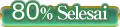
<style>
.page{position:relative;width:120px;height:27px;background:#ffffff}
.page>*{position:absolute;margin:0}
.t1{font:18px "RyuminPro-ExBold";letter-spacing:-0.08em;color:#ffffff}
.t2{font:23.8px "WineArial";color:#ffffff;scale:1.05 1}
.t3{font:16px "RyuminPro-ExBold";color:#ffffff}
</style>
<div class="page">
<p class="t1" style="left:12px;top:2px;width:96px;height:18px"><span class="t2">80</span><span class="t3">%</span> Selesai</p>
</div>
